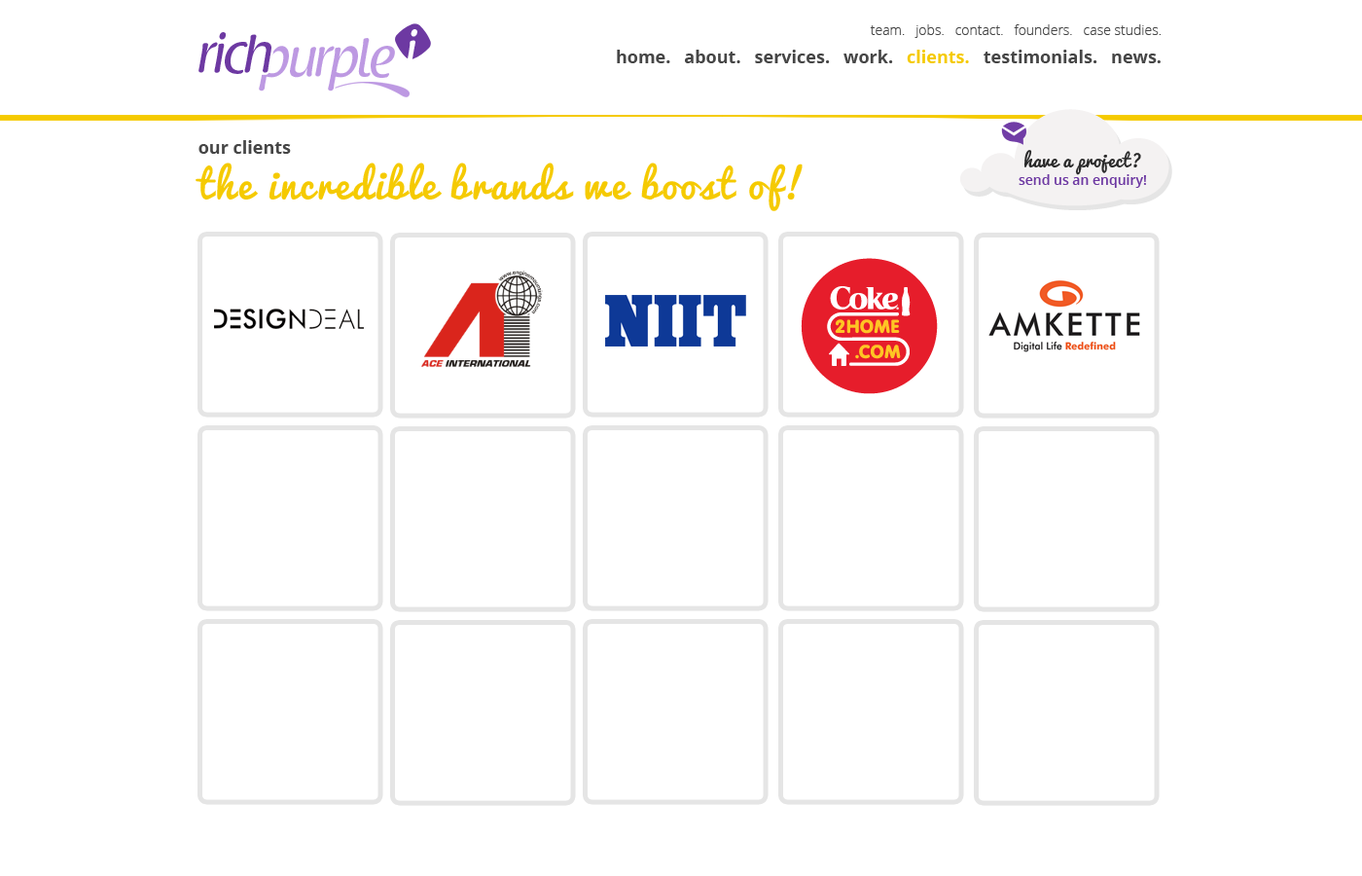
<style>
.page{position:relative;width:1362px;height:876px;background:#ffffff}
.page>*{position:absolute;margin:0}
.t1{font:52.7px "RaspoutineClassic";letter-spacing:-0.05em;color:#ffffff}
.t2{font:13.6px "OpenSans-Light";color:#464646}
.t3{font:54.2px "RaspoutineClassic";letter-spacing:-0.05em;color:#6d39a2}
.t4{font:54.2px "RaspoutineClassic";letter-spacing:-0.05em;color:#bd99e2}
.t5{font:17.5px "OpenSans-Bold";color:#464646}
.t6{font:17.5px "OpenSans-Bold";color:#f5ca01}
.t7{font:13.6px/17.5px "OpenSans-Semibold";color:#6d39a2}
.t8{font:18.5px/17.5px "Pacifico-Regular";letter-spacing:0.02em;color:#2a2a2a}
.t9{font:38.9px "Pacifico-Regular";letter-spacing:0.06em;color:#f5ca01}
</style>
<div class="page">
<p class="t1" style="left:406px;top:29px;width:11px;height:40px">i</p>
<p class="t2" style="left:870px;top:24px;width:291px;height:14px">team.   jobs.   contact.   founders.   case studies.</p>
<p class="t3" style="left:198px;top:32px;width:73px;height:42px">rich</p>
<p class="t4" style="left:259px;top:38px;width:136px;height:53px">purple</p>
<p class="t5" style="left:617px;top:50px;width:544px;height:13px">home.   about.   services.   work.   <span class="t6">clients.</span>   testimonials.   news.</p>
<p class="t5" style="left:198px;top:140px;width:93px;height:14px">our clients</p>
<p class="t7" style="left:1019px;top:150px;width:127px;height:38px;text-align:center"><span class="t8">have a project?<br></span>send us an enquiry!</p>
<p class="t9" style="left:196px;top:162px;width:607px;height:49px">the incredible brands we boost of!</p>
</div>
